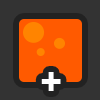
<style>
.page{position:relative;width:100px;height:100px;background:#333333}
.page>*{position:absolute;margin:0}
.t1{font:37.5px "FranklinGothic-Heavy";color:#ffffff}
</style>
<div class="page">
<p class="t1" style="left:41px;top:72px;width:20px;height:19px">+</p>
</div>
